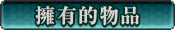
<style>
.page{position:relative;width:175px;height:30px}
.page>*{position:absolute;margin:0}
.t1{font:20px "RyuminPr6N-ExBold";letter-spacing:0.075em;color:#d9d4d2}
</style>
<div class="page">
<p class="t1" style="left:35px;top:6px;width:104px;height:20px">擁有的物品</p>
</div>
